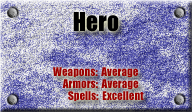
<style>
.page{position:relative;width:192px;height:112px}
.page>*{position:absolute;margin:0}
.t1{font:24px "Impact";color:#000000}
.t2{font:11px "Impact";color:#9c0000}
</style>
<div class="page">
<p class="t1" style="left:73px;top:12px;width:46px;height:20px">Hero</p>
<p class="t2" style="left:53px;top:67px;width:85px;height:11px">Weapons:  Average</p>
<p class="t2" style="left:62px;top:79px;width:77px;height:11px">Armors:  Average</p>
<p class="t2" style="left:68px;top:91px;width:76px;height:10px">Spells:  Excellent</p>
</div>
